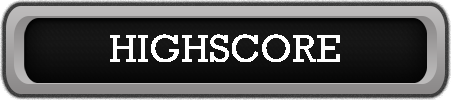
<style>
.page{position:relative;width:451px;height:100px}
.page>*{position:absolute;margin:0}
.t1{font:39.8px "Rockwell";color:#ffffff}
</style>
<div class="page">
<p class="t1" style="left:110px;top:34px;width:230px;height:28px">HIGHSCORE</p>
</div>
